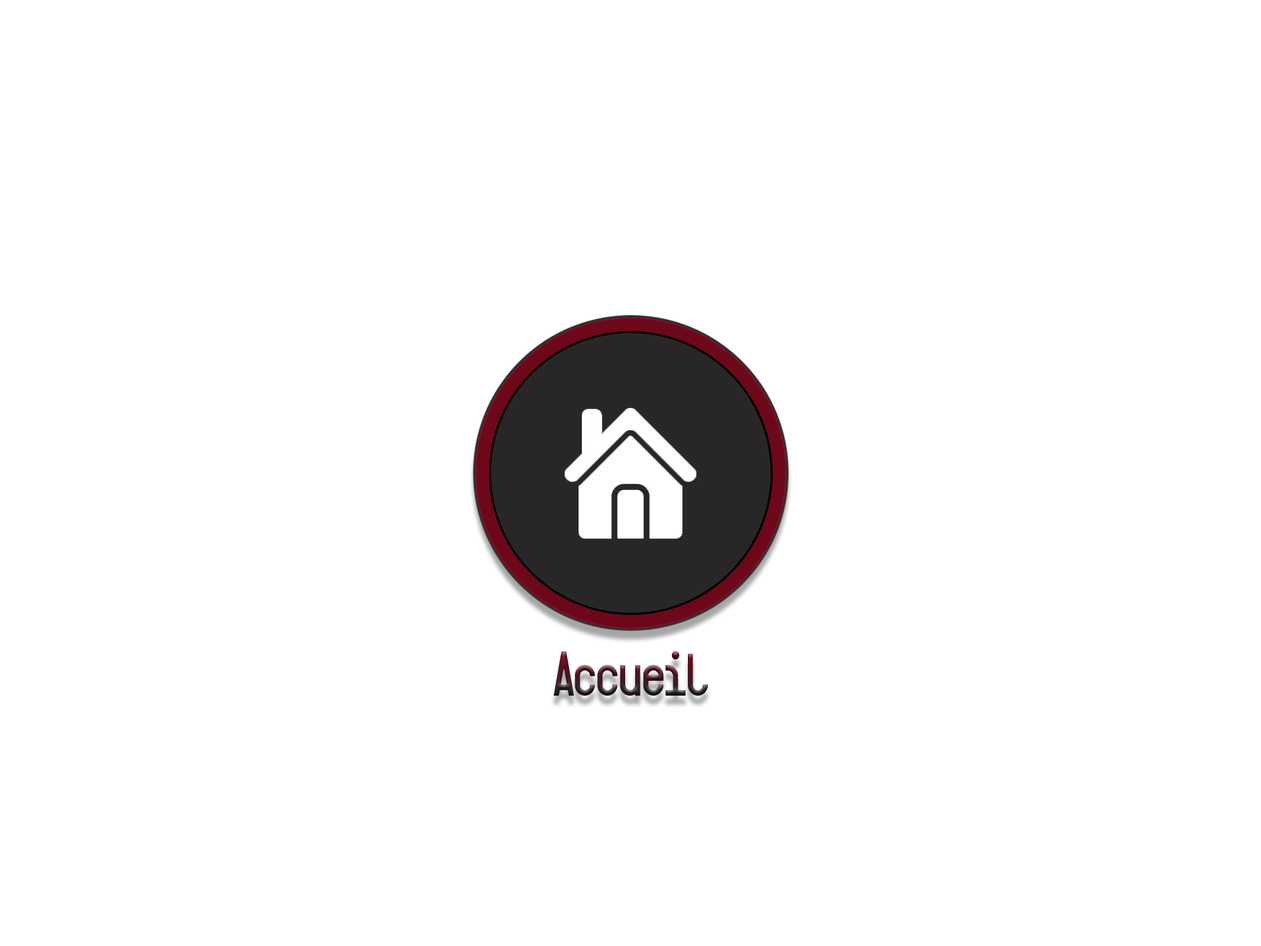
<style>
.page{position:relative;width:1261px;height:946px;background:#ffffff}
.page>*{position:absolute;margin:0}
.t1{font:55.6px "Targa";scale:0.9 1}
</style>
<div class="page">
<p class="t1" style="left:554px;top:651px;width:154px;height:44px">Accueil</p>
</div>
